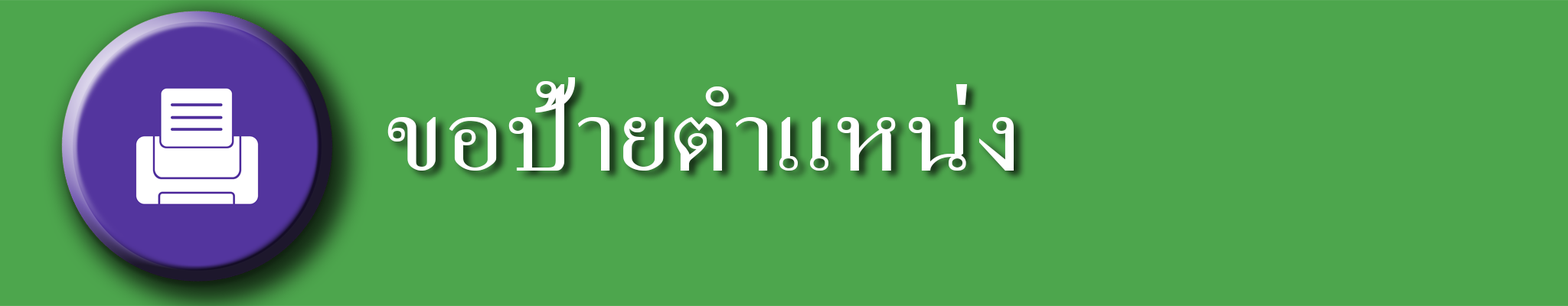
<style>
.page{position:relative;width:1568px;height:306px;background:#4da64d}
.page>*{position:absolute;margin:0}
.t1{font:133.7px "AngsanaNew";color:#ffffff;scale:1.15 1}
</style>
<div class="page">
<p class="t1" style="left:387px;top:77px;width:627px;height:94px">ขอป้ายตำแหน่ง</p>
</div>
